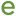
<style>
.page{position:relative;width:16px;height:16px;background:#ffffff}
.page>*{position:absolute;margin:0}
.t1{font:28px "AvenirLTStd-Roman";color:#64933a}
</style>
<div class="page">
<p class="t1" style="left:1px;top:1px;width:14px;height:14px">e</p>
</div>
